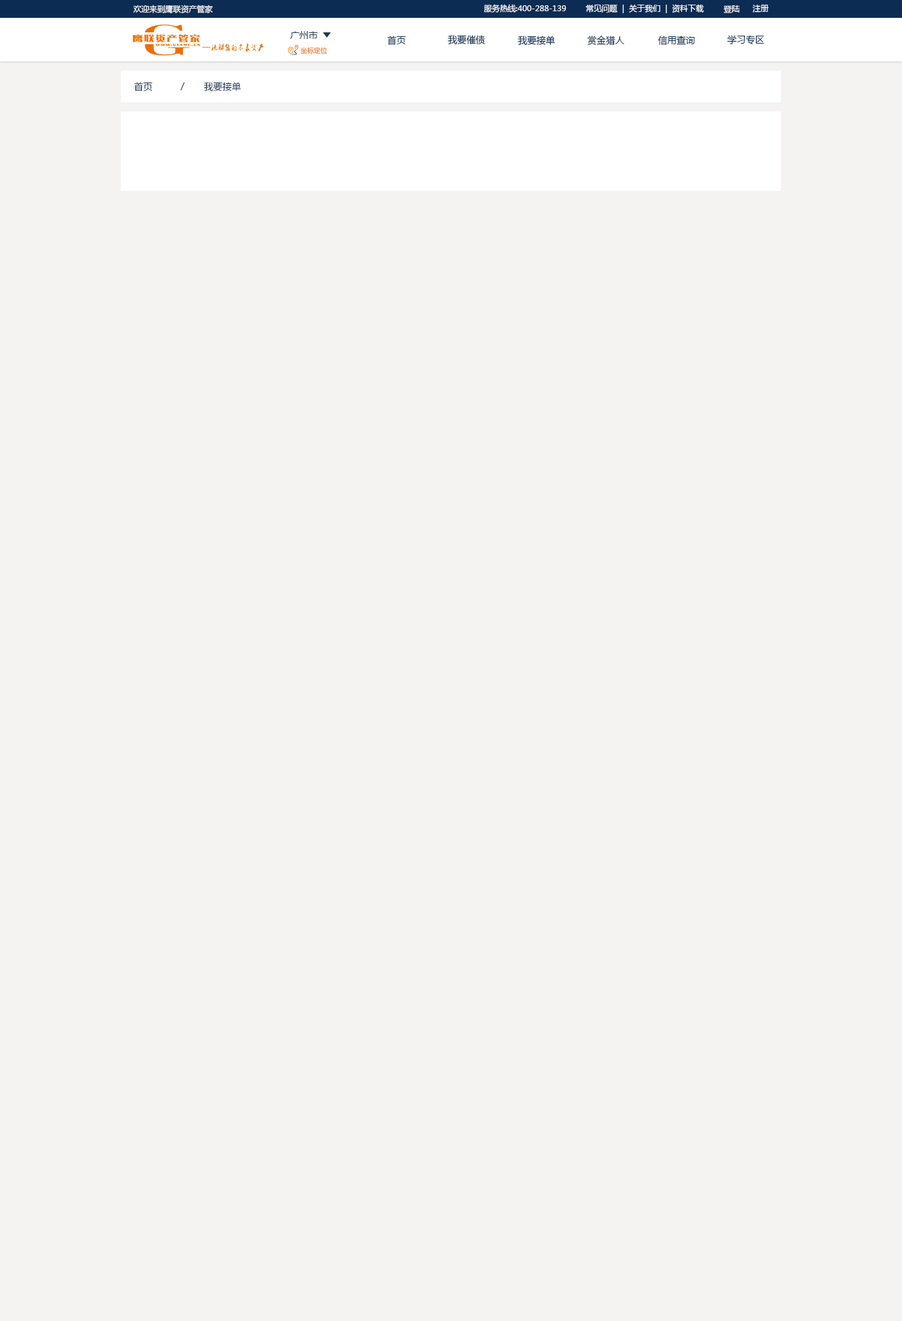
<style>
.page{position:relative;width:902px;height:1321px;background:#f5f2f2}
.page>*{position:absolute;margin:0}
.t1{font:7.9px "MicrosoftYaHei";color:#fefefe}
.t2{font:9.2px "MicrosoftYaHei";color:#21394b}
.t3{font:9.2px "MicrosoftYaHei";color:#0d2c54}
.t4{font:6.6px "MicrosoftYaHei"}
</style>
<div class="page">
<p class="t1" style="left:133px;top:5px;width:80px;height:8px">欢迎来到鹰联资产管家</p>
<p class="t1" style="left:484px;top:4px;width:82px;height:9px">服务热线:400-288-139</p>
<p class="t1" style="left:586px;top:4px;width:118px;height:9px">常见问题  |  关于我们  |  资料下载</p>
<p class="t1" style="left:724px;top:5px;width:16px;height:8px">登陆</p>
<p class="t1" style="left:753px;top:5px;width:16px;height:8px">注册</p>
<p class="t2" style="left:290px;top:31px;width:28px;height:8px">广州市</p>
<p class="t3" style="left:387px;top:36px;width:19px;height:9px">首页</p>
<p class="t3" style="left:448px;top:35px;width:38px;height:10px">我要催债</p>
<p class="t3" style="left:518px;top:36px;width:38px;height:10px">我要接单</p>
<p class="t3" style="left:588px;top:36px;width:37px;height:10px">赏金猎人</p>
<p class="t3" style="left:658px;top:36px;width:37px;height:9px">信用查询</p>
<p class="t3" style="left:727px;top:35px;width:37px;height:10px">学习专区</p>
<p class="t4" style="left:301px;top:47px;width:27px;height:7px">坐标定位</p>
<p class="t3" style="left:134px;top:82px;width:19px;height:9px">首页</p>
<p class="t3" style="left:180px;top:82px;width:5px;height:9px">/</p>
<p class="t3" style="left:204px;top:82px;width:37px;height:9px">我要接单</p>
</div>
